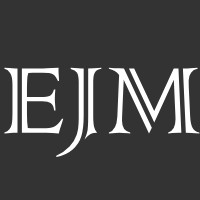
<style>
.page{position:relative;width:200px;height:200px;background:#333333}
.page>*{position:absolute;margin:0}
.t1{font:124.8px "ColonnaMT";color:#ffffff}
</style>
<div class="page">
<p class="t1" style="left:4px;top:67px;width:196px;height:90px">EJM</p>
</div>
